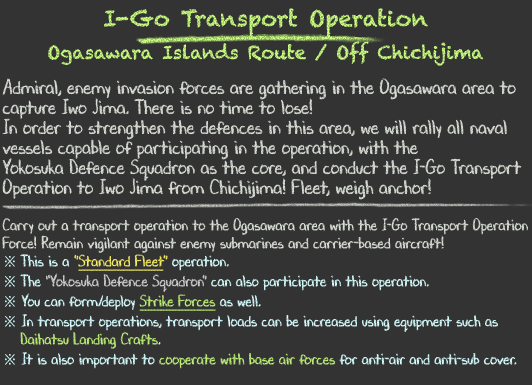
<style>
.page{position:relative;width:532px;height:385px;background:#333333}
.page>*{position:absolute;margin:0}
.t1{font:18px/36px "Chalkduster"}
.t2{font:22px/36px "Chalkduster"}
.t3{font:20px/20px "DJBChalkItUp";color:#d9ded6;scale:0.9 1}
.t4{font:16px/18px "DJBChalkItUp";color:#d9ded6;scale:0.9 1}
.t5{font:16px/20px "TimesNewRomanPSMT";color:#d7feff;scale:0.9 1}
.t6{font:16px/20px "DJBChalkItUp";color:#d7feff;scale:0.9 1}
.t7{font:16px/20px "DJBChalkItUp";color:#f5ed68;scale:0.9 1}
.t8{font:16px/20px "DJBChalkItUp";color:#f5ed68;text-decoration:underline;scale:0.9 1}
.t9{font:16px/20px "DJBChalkItUp";color:#cfcfcf;scale:0.9 1}
.t10{font:16px/20px "DJBChalkItUp";color:#bdef78;text-decoration:underline;scale:0.9 1}
.t11{font:16px/18px "TimesNewRomanPSMT";color:#d7feff;scale:0.9 1}
.t12{font:16px/18px "DJBChalkItUp";color:#d7feff;scale:0.9 1}
.t13{font:16px/20px "DJBChalkItUp";color:#bdef78;scale:0.9 1}
</style>
<div class="page">
<p class="t1" style="left:48px;top:8px;width:436px;height:58px;text-align:center"><span class="t2">I-Go Transport Operation<br></span>Ogasawara Islands Route / Off Chichijima</p>
<p class="t3" style="left:2px;top:78px;width:526px;height:291px">Admiral, enemy invasion forces are gathering in the Ogasawara area to<br>capture Iwo Jima. There is no time to lose!<br>In order to strengthen the defences in this area, we will rally all naval<br>vessels capable of participating in the operation, with the<br>Yokosuka Defence Squadron as the core, and conduct the I-Go Transport<br>Operation to Iwo Jima from Chichijima! Fleet, weigh anchor!<br><br><span class="t4">Carry out a transport operation to the Ogasawara area with the I-Go Transport Operation<br>Force! Remain vigilant against enemy submarines and carrier-based aircraft!<br></span><span class="t5">※ </span><span class="t6">This is a </span><span class="t7">"</span><span class="t8">Standard Fleet</span><span class="t7">"</span><span class="t6"> operation.<br></span><span class="t5">※ </span><span class="t6">The </span><span class="t9">“Yokosuka Defence Squadron”</span><span class="t6"> can also participate in this operation.<br></span><span class="t5">※</span><span class="t6"> You can form/deploy </span><span class="t10">Strike Forces</span><span class="t6"> as well.<br></span><span class="t11">※</span><span class="t12"> In transport operations, transport loads can be increased using equipment such as<br>　 </span><span class="t13">Daihatsu Landing Crafts</span><span class="t6">.<br></span><span class="t11">※ </span><span class="t6">It is also important to </span><span class="t13">cooperate with base air forces</span><span class="t6"> for anti-air and anti-sub cover.</span></p>
</div>
